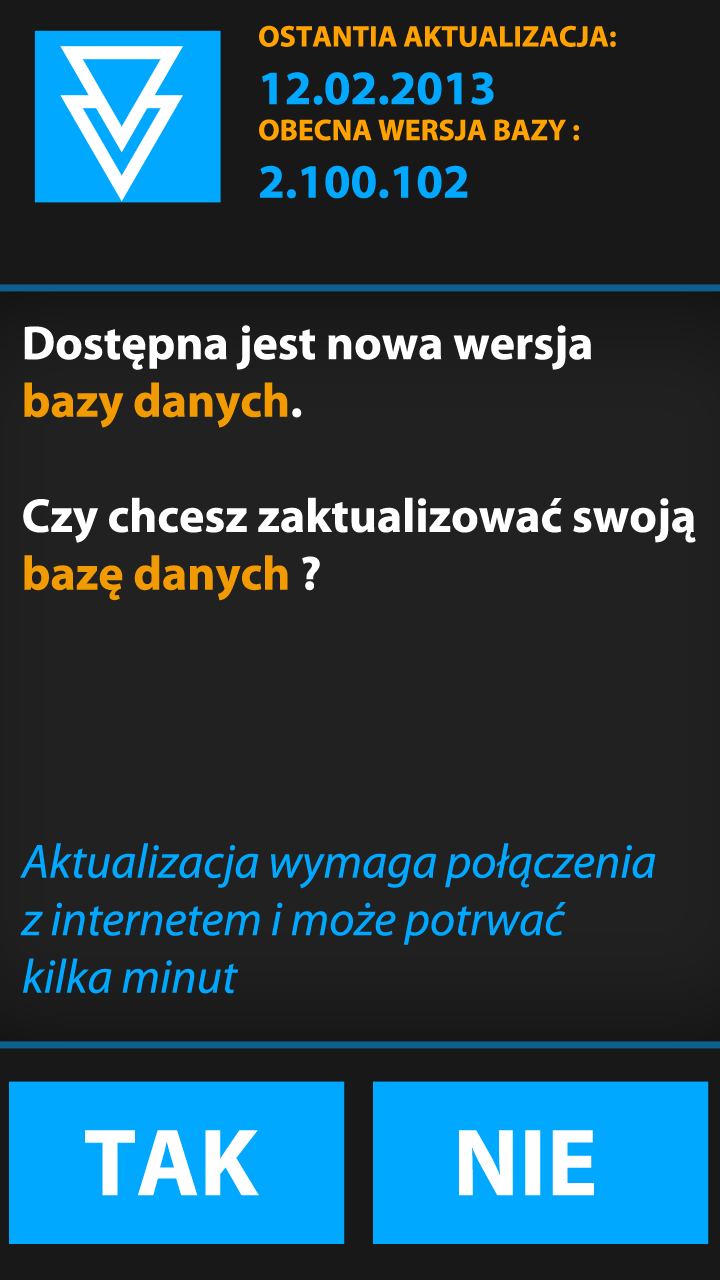
<style>
.page{position:relative;width:720px;height:1280px;background:#212121}
.page>*{position:absolute;margin:0}
.t1{font:30px "MyriadPro-Bold";color:#ffa200}
.t2{font:48px "MyriadPro-Bold";color:#00a8ff}
.t3{font:48px "MyriadPro-It";color:#00a8ff}
.t4{font:48px "MyriadPro-Bold";color:#ffffff}
.t5{font:48px "MyriadPro-Bold";color:#f29a02}
.t6{font:96px "MyriadPro-Bold";color:#ffffff}
</style>
<div class="page">
<p class="t1" style="left:259px;top:25px;width:357px;height:174px">OSTANTIA AKTUALIZACJA:<br><span class="t2">12.02.2013<br></span>OBECNA WERSJA BAZY :<br><span class="t2">2.100.102</span></p>
<p class="t3" style="left:20px;top:325px;width:676px;height:669px"><span class="t4">Dostępna jest nowa wersja <br></span><span class="t5">bazy danych</span><span class="t4">.<br><br>Czy chcesz zaktualizować swoją<br></span><span class="t5">bazę danych</span><span class="t4"> ?<br><br><br><br><br></span>Aktualizacja wymaga połączenia <br>z internetem i może potrwać <br>kilka minut</p>
<p class="t6" style="left:85px;top:1130px;width:174px;height:66px">TAK</p>
<p class="t6" style="left:459px;top:1130px;width:135px;height:66px">NIE</p>
</div>
